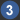
<style>
.page{position:relative;width:20px;height:20px;background:#3b5f97}
.page>*{position:absolute;margin:0}
.t1{font:14px "Arial-BoldMT";letter-spacing:0.025em;color:#fcfdfd}
</style>
<div class="page">
<p class="t1" style="left:6px;top:5px;width:7px;height:11px">3</p>
</div>
